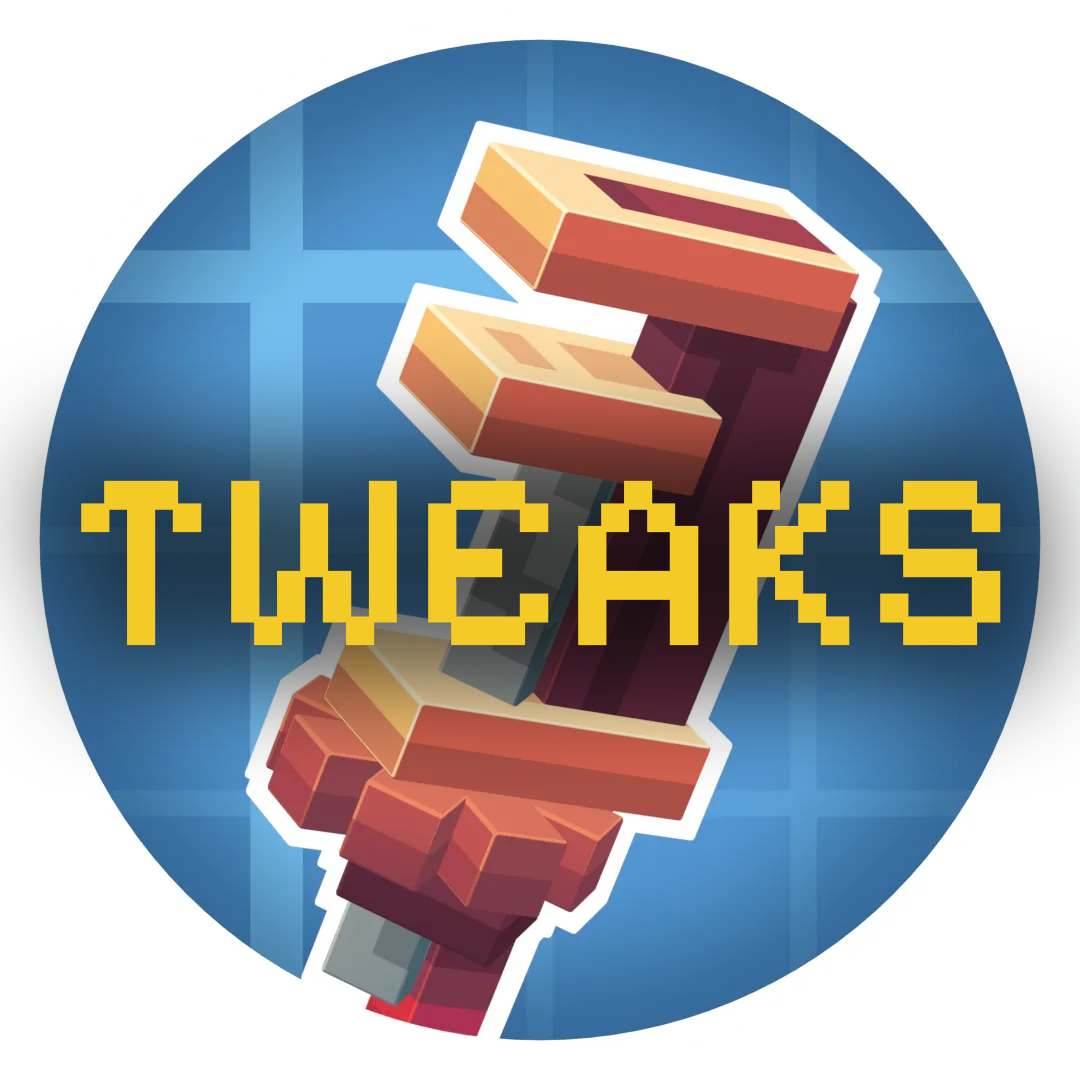
<style>
.page{position:relative;width:1080px;height:1080px;background:#ffffff}
.page>*{position:absolute;margin:0}
.t1{font:363.6px "PixelifySans-Medium";color:#f3ca26;font-variant:small-caps}
</style>
<div class="page">
<p class="t1" style="left:81px;top:480px;width:920px;height:166px">tweaks</p>
</div>
